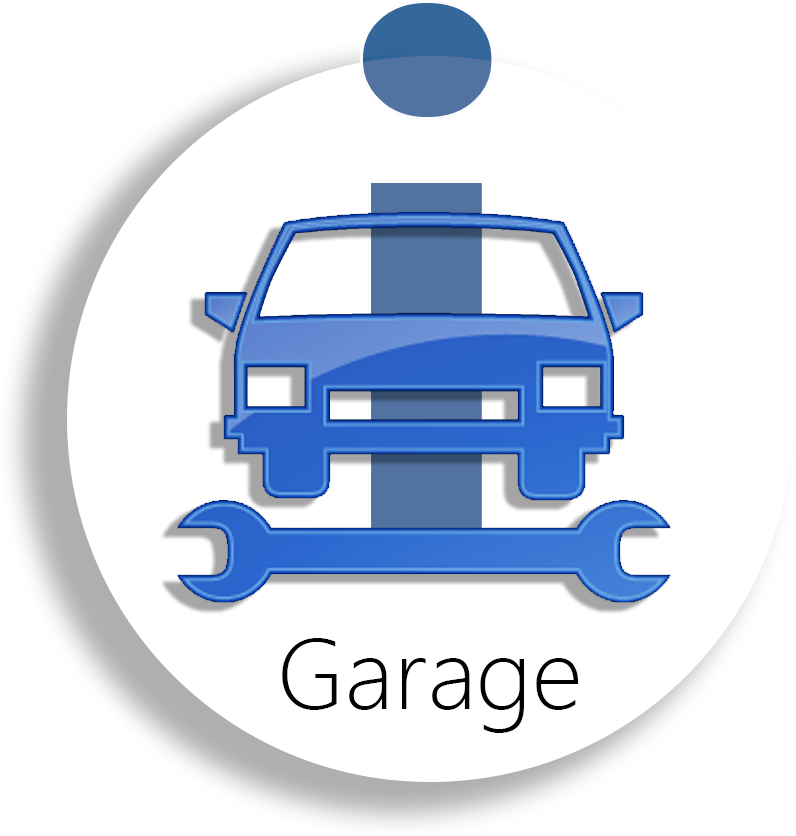
<style>
.page{position:relative;width:796px;height:836px;background:#ffffff}
.page>*{position:absolute;margin:0}
.t1{font:756px "SegoeUI-Bold"}
.t2{font:100px "SegoeUI-Light";color:#000203}
</style>
<div class="page">
<p class="t1" style="left:359px;top:0px;width:136px;height:558px">i</p>
<p class="t2" style="left:282px;top:638px;width:297px;height:95px">Garage</p>
</div>
